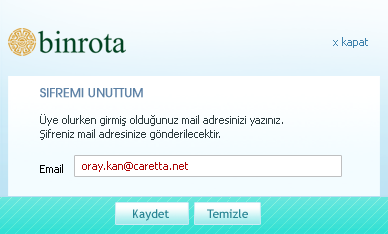
<style>
.page{position:relative;width:388px;height:234px}
.page>*{position:absolute;margin:0}
.t1{font:11px "Tahoma";color:#3f82ad}
.t2{font:12px "TRAvalonPlain";color:#5e82a6;font-weight:bold}
.t3{font:11px "Tahoma";color:#2e3c3f}
.t4{font:11px "Tahoma";color:#ad0505}
.t5{font:11px "Tahoma";color:#000000}
.t6{font:12px "TrebuchetMS";color:#288493}
</style>
<div class="page">
<p class="t1" style="left:333px;top:37px;width:35px;height:11px">x kapat</p>
<p class="t2" style="left:40px;top:88px;width:103px;height:10px">SIFREMI UNUTTUM</p>
<p class="t3" style="left:40px;top:114px;width:243px;height:26px">Üye olurken girmiş olduğunuz mail adresinizi yazınız.<br>Şifreniz mail adresinize gönderilecektir.</p>
<p class="t4" style="left:82px;top:161px;width:106px;height:11px">oray.kan@caretta.net</p>
<p class="t5" style="left:40px;top:164px;width:23px;height:9px">Email</p>
<p class="t6" style="left:133px;top:209px;width:36px;height:12px">Kaydet</p>
<p class="t6" style="left:207px;top:209px;width:41px;height:9px">Temizle</p>
</div>
